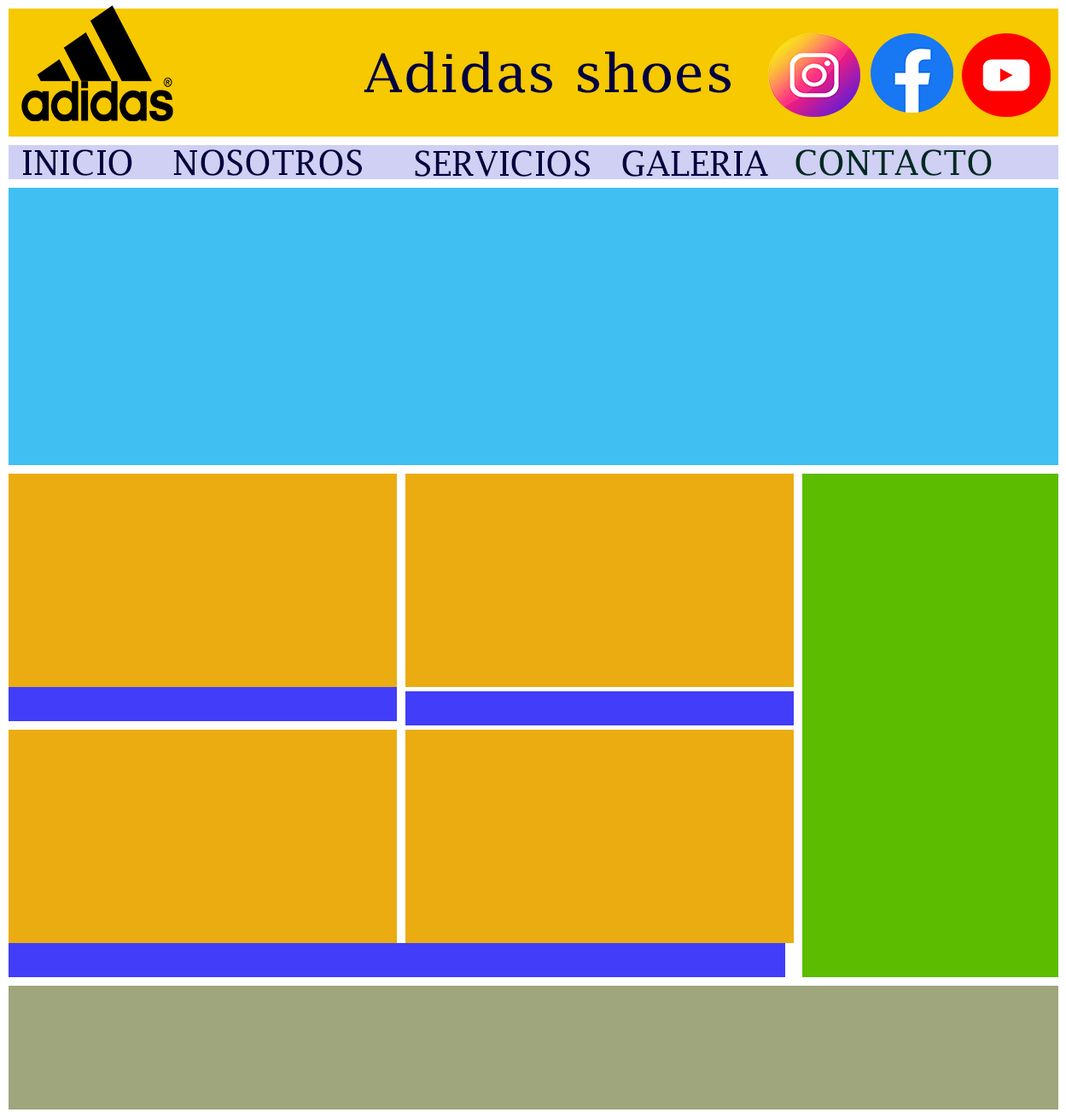
<style>
.page{position:relative;width:1066px;height:1118px;background:#ebac11}
.page>*{position:absolute;margin:0}
.t1{font:52.8px "LucidaFax";color:#00013f;scale:1.05 1}
.t2{font:34.4px "LucidaFax";color:#00013f}
.t3{font:34.4px "LucidaFax";color:#002923}
</style>
<div class="page">
<p class="t1" style="left:364px;top:51px;width:367px;height:42px">Adidas shoes</p>
<p class="t2" style="left:23px;top:149px;width:109px;height:27px">INICIO</p>
<p class="t2" style="left:173px;top:149px;width:189px;height:27px">NOSOTROS</p>
<p class="t3" style="left:796px;top:149px;width:196px;height:27px">CONTACTO</p>
<p class="t2" style="left:415px;top:150px;width:175px;height:27px">SERVICIOS</p>
<p class="t2" style="left:622px;top:150px;width:146px;height:27px">GALERIA</p>
</div>
